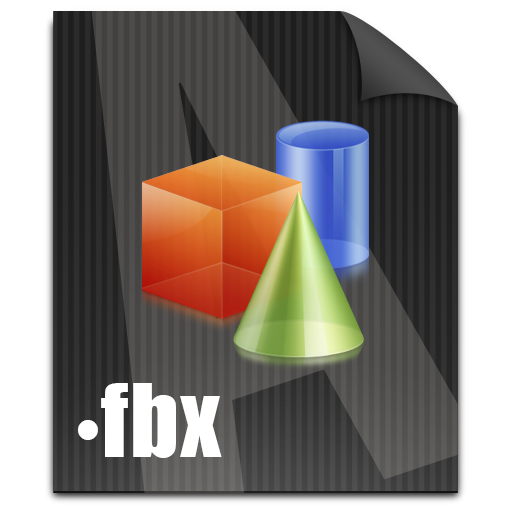
<style>
.page{position:relative;width:512px;height:512px;background:#ffffff}
.page>*{position:absolute;margin:0}
.t1{font:93.5px "Impact";letter-spacing:0.02em;color:#ffffff}
.t2{font:68.5px "Impact";letter-spacing:0.02em;color:#ffffff}
</style>
<div class="page">
<p class="t1" style="left:78px;top:383px;width:144px;height:75px"><span class="t2">•</span>fbx</p>
</div>
